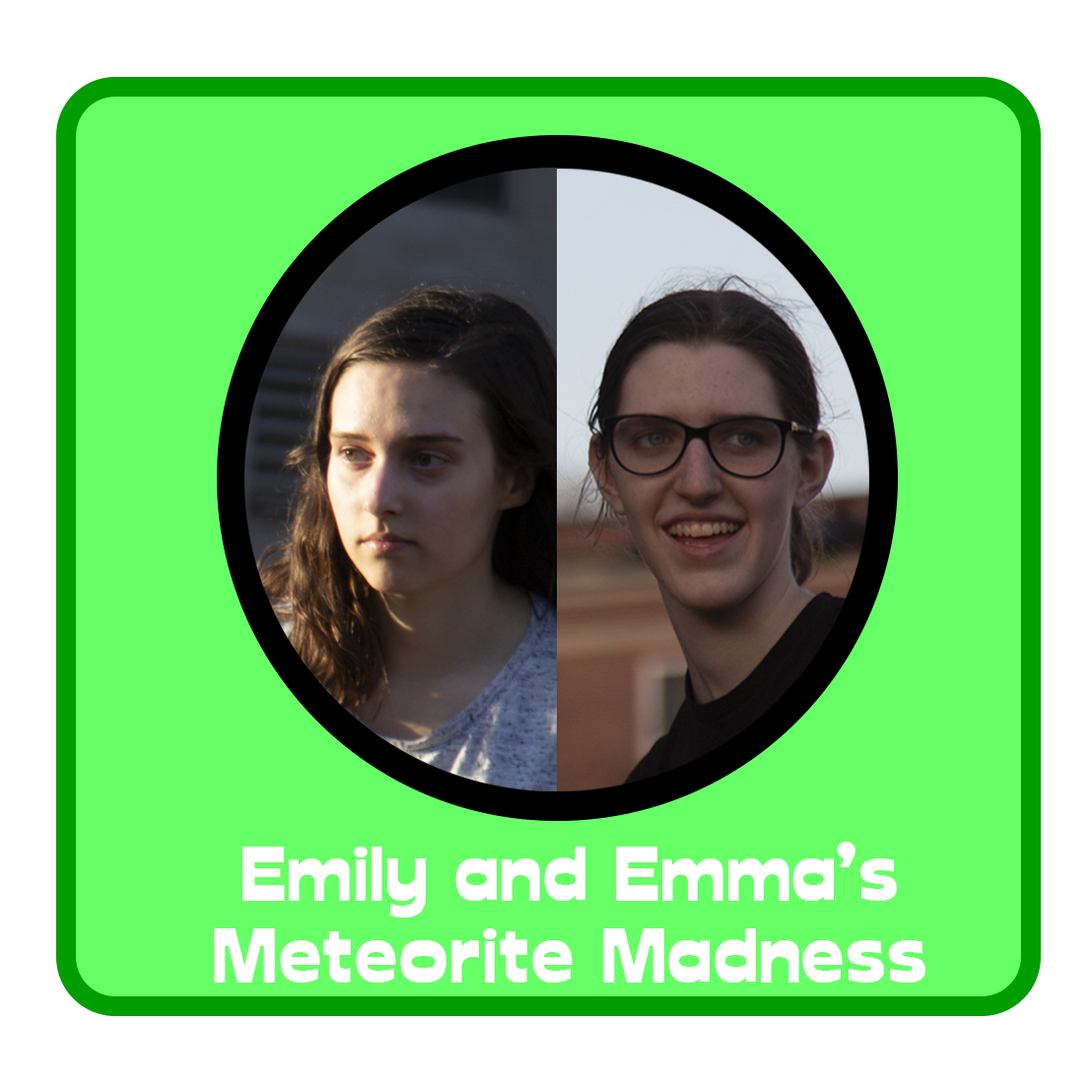
<style>
.page{position:relative;width:1092px;height:1092px;background:#66ff66}
.page>*{position:absolute;margin:0}
.t1{font:73.9px/82.1px "Glockenspiel";color:#ffffff}
</style>
<div class="page">
<p class="t1" style="left:214px;top:842px;width:711px;height:141px;text-align:center">Emily and Emma’s<br>Meteorite Madness</p>
</div>
